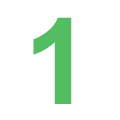
<style>
.page{position:relative;width:120px;height:120px;background:#ffffff}
.page>*{position:absolute;margin:0}
.t1{font:120px "Arial-BoldMT";letter-spacing:-0.075em;color:#52bd61}
</style>
<div class="page">
<p class="t1" style="left:33px;top:17px;width:39px;height:87px">1</p>
</div>
